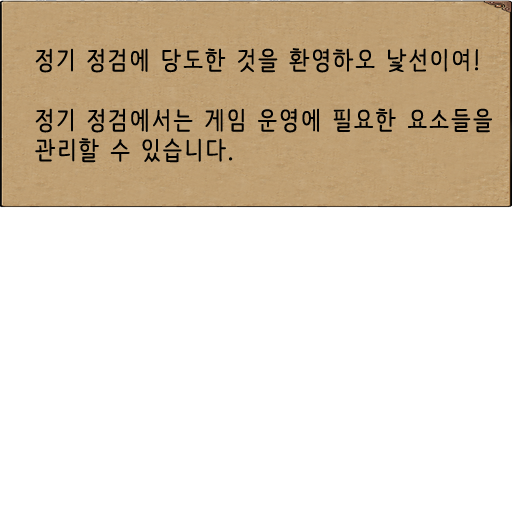
<style>
.page{position:relative;width:512px;height:512px;background:#ffffff}
.page>*{position:absolute;margin:0}
.t1{font:25px "NanumBarunpen";letter-spacing:0.075em;color:#000000;font-weight:bold}
</style>
<div class="page">
<p class="t1" style="left:35px;top:48px;width:457px;height:115px;text-align:justify">정기 정검에 당도한 것을 환영하오 낯선이여!<br><br>정기 정검에서는 게임 운영에 필요한 요소들을 관리할 수 있습니다.</p>
</div>
